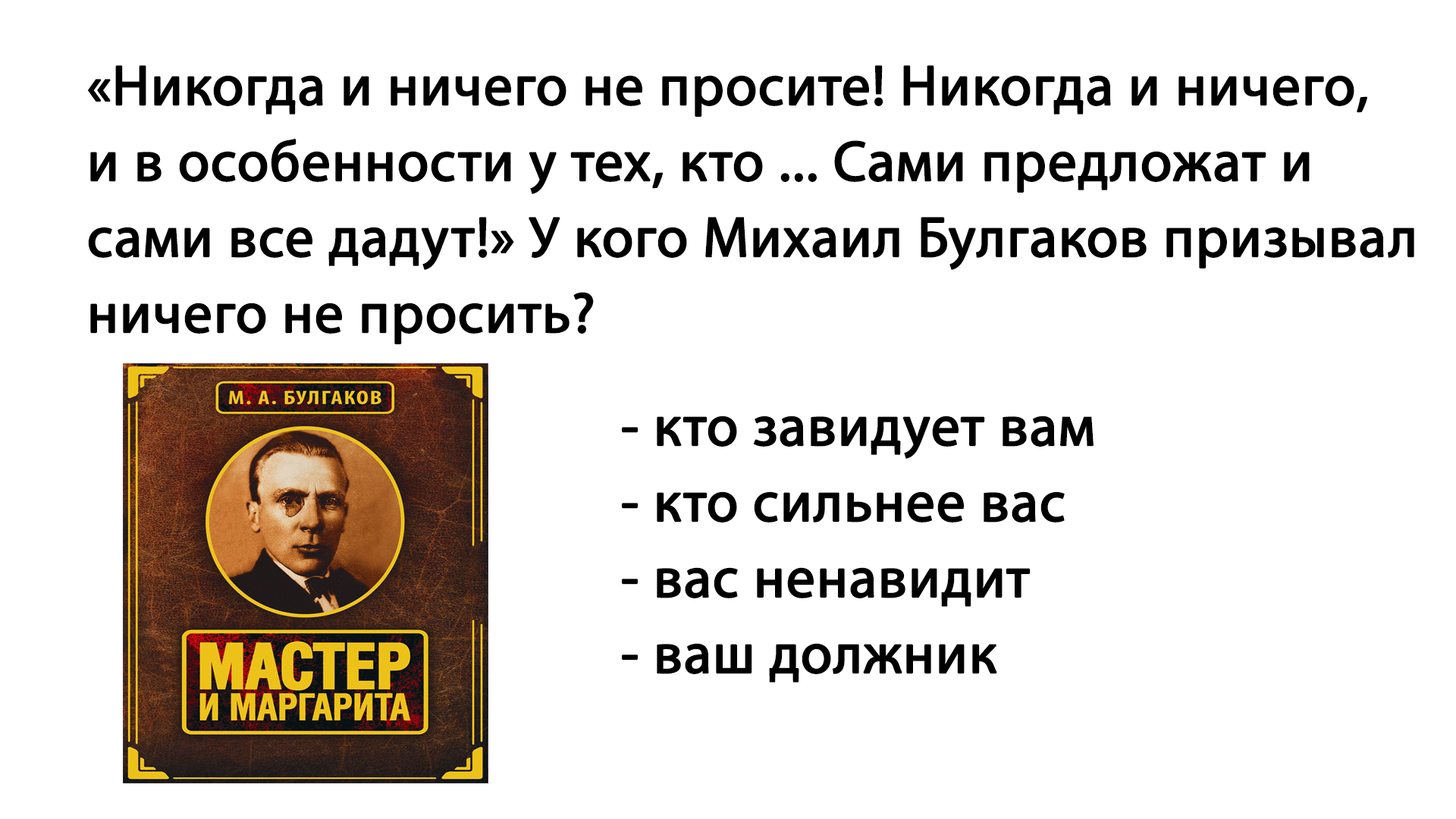
<style>
.page{position:relative;width:1456px;height:819px;background:#ffffff}
.page>*{position:absolute;margin:0}
.t1{font:56.9px/75.8px "MyriadPro-Regular";color:#000000;font-weight:bold}
</style>
<div class="page">
<p class="t1" style="left:87px;top:65px;width:1327px;height:279px">«Никогда и ничего не просите! Никогда и ничего, <br>и в особенности у тех, кто ... Сами предложат и <br>сами все дадут!» У кого Михаил Булгаков призывал<br>ничего не просить?</p>
<p class="t1" style="left:622px;top:416px;width:472px;height:266px">- кто завидует вам<br>- кто сильнее вас<br>- вас ненавидит<br>- ваш должник</p>
</div>
